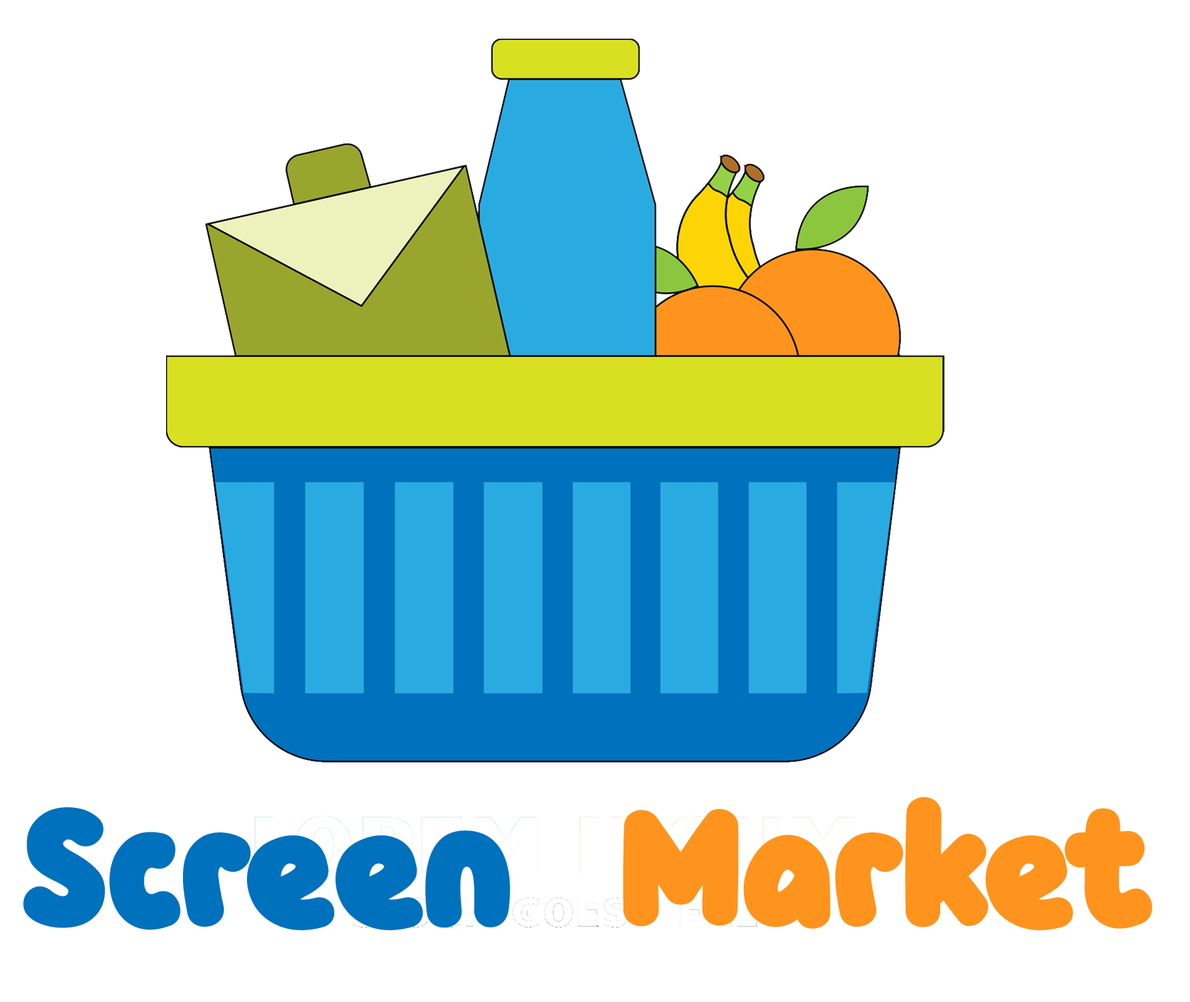
<style>
.page{position:relative;width:1190px;height:1002px;background:#ffffff}
.page>*{position:absolute;margin:0}
.t1{font:163.3px "Knicknack-Medium";color:#0071bc}
.t2{font:163.3px "Knicknack-Medium";color:#fe941d}
</style>
<div class="page">
<p class="t1" style="left:23px;top:797px;width:1130px;height:133px">Screen  <span class="t2">Market</span></p>
</div>
